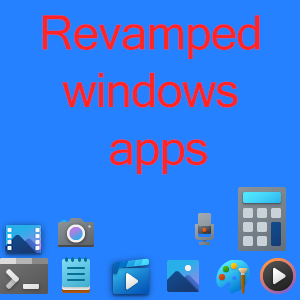
<style>
.page{position:relative;width:300px;height:300px;background:#2581ff}
.page>*{position:absolute;margin:0}
.t1{font:48px "MicrosoftSansSerif";letter-spacing:-0.025em;color:#ff2525}
</style>
<div class="page">
<p class="t1" style="left:42px;top:15px;width:218px;height:160px">Revamped<br>  windows <br>      apps</p>
</div>
